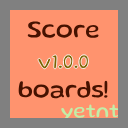
<style>
.page{position:relative;width:128px;height:128px;background:#ff936e}
.page>*{position:absolute;margin:0}
.t1{font:25px "Gluten-Regular";color:#461200}
.t2{font:21px "Gluten-Regular"}
.t3{font:21px "Gluten-Regular";color:#c2eda8}
</style>
<div class="page">
<p class="t1" style="left:18px;top:21px;width:90px;height:78px;text-align:center">Score<br><br>boards!</p>
<p class="t2" style="left:37px;top:53px;width:53px;height:17px">v1.0.0</p>
<p class="t3" style="left:61px;top:104px;width:58px;height:18px">yetnt</p>
</div>
